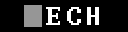
<style>
.page{position:relative;width:128px;height:32px;background:#000000}
.page>*{position:absolute;margin:0}
.t1{font:30.8px "Terminal_Hex";color:#ffffff}
</style>
<div class="page">
<p class="t1" style="left:26px;top:7px;width:73px;height:18px">TECH</p>
</div>
